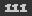
<style>
.page{position:relative;width:32px;height:16px;background:#333333}
.page>*{position:absolute;margin:0}
.t1{font:14px "CooperBlack";color:#cacaca}
</style>
<div class="page">
<p class="t1" style="left:5px;top:4px;width:22px;height:8px">111</p>
</div>
